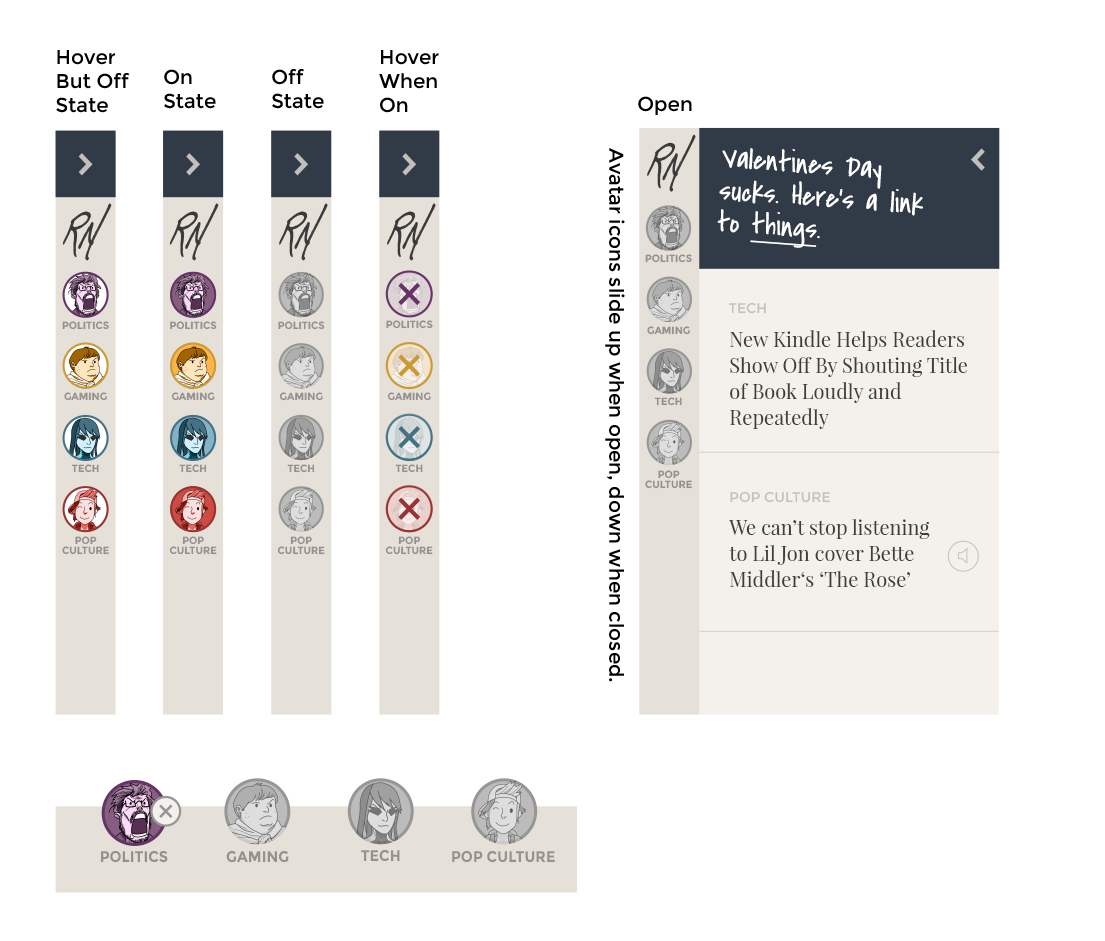
<style>
.page{position:relative;width:1105px;height:941px;background:#ffffff}
.page>*{position:absolute;margin:0}
.t1{font:20px "Montserrat-Regular";color:#000000}
.t2{font:30px/32px "CoveredByYourGrace";color:#ffffff}
.t3{font:30px/32px "CoveredByYourGrace";color:#ffffff;text-decoration:underline}
.t4{font:10.6px "Montserrat-Bold";color:#96918f;scale:0.95 1}
.t5{font:14px "Montserrat-Regular";color:#c5c1be}
.t6{font:20px/26px "PlayfairDisplay-Regular";color:#3f3d3b}
.t7{font:10.6px/10px "Montserrat-Bold";color:#96918f;scale:0.95 1}
.t8{font:15.4px "Montserrat-Bold";color:#96918f;scale:0.95 1}
</style>
<div class="page">
<p class="t1" style="left:56px;top:50px;width:74px;height:63px">Hover<br>But Off<br>State</p>
<p class="t1" style="left:379px;top:50px;width:60px;height:63px">Hover<br>When<br>On</p>
<p class="t1" style="left:164px;top:69px;width:52px;height:40px">On<br>State</p>
<p class="t1" style="left:272px;top:69px;width:52px;height:40px">Off<br>State</p>
<p class="t1" style="left:638px;top:96px;width:54px;height:19px">Open</p>
<p class="t1" style="left:605px;top:148px;width:20px;height:534px">Avatar icons slide up when open, down when closed.</p>
<p class="t2" style="left:717px;top:148px;width:206px;height:100px">Valentines Day sucks. Here’s a link to <span class="t3">things</span>.</p>
<p class="t4" style="left:645px;top:254px;width:47px;height:9px">POLITICS</p>
<p class="t5" style="left:729px;top:302px;width:37px;height:12px">TECH</p>
<p class="t4" style="left:62px;top:321px;width:47px;height:9px">POLITICS</p>
<p class="t4" style="left:170px;top:321px;width:47px;height:9px">POLITICS</p>
<p class="t4" style="left:278px;top:321px;width:47px;height:9px">POLITICS</p>
<p class="t4" style="left:386px;top:320px;width:47px;height:9px">POLITICS</p>
<p class="t4" style="left:647px;top:326px;width:43px;height:9px">GAMING</p>
<p class="t6" style="left:730px;top:330px;width:237px;height:99px">New Kindle Helps Readers Show Off By Shouting Title of Book Loudly and Repeatedly</p>
<p class="t4" style="left:64px;top:392px;width:43px;height:9px">GAMING</p>
<p class="t4" style="left:171px;top:392px;width:44px;height:9px">GAMING</p>
<p class="t4" style="left:279px;top:392px;width:44px;height:9px">GAMING</p>
<p class="t4" style="left:387px;top:392px;width:44px;height:9px">GAMING</p>
<p class="t4" style="left:654px;top:397px;width:28px;height:9px">TECH</p>
<p class="t4" style="left:71px;top:464px;width:28px;height:9px">TECH</p>
<p class="t4" style="left:179px;top:464px;width:28px;height:9px">TECH</p>
<p class="t4" style="left:287px;top:464px;width:28px;height:9px">TECH</p>
<p class="t4" style="left:395px;top:464px;width:28px;height:9px">TECH</p>
<p class="t7" style="left:645px;top:470px;width:47px;height:19px;text-align:center">POP<br>CULTURE</p>
<p class="t5" style="left:730px;top:491px;width:101px;height:12px">POP CULTURE</p>
<p class="t6" style="left:729px;top:519px;width:201px;height:68px">We can’t stop listening to Lil Jon cover Bette Middler‘s ‘The Rose’</p>
<p class="t7" style="left:62px;top:536px;width:47px;height:19px;text-align:center">POP<br>CULTURE</p>
<p class="t7" style="left:169px;top:536px;width:48px;height:19px;text-align:center">POP<br>CULTURE</p>
<p class="t7" style="left:277px;top:536px;width:48px;height:19px;text-align:center">POP<br>CULTURE</p>
<p class="t7" style="left:385px;top:536px;width:48px;height:19px;text-align:center">POP<br>CULTURE</p>
<p class="t8" style="left:101px;top:851px;width:67px;height:12px">POLITICS</p>
<p class="t8" style="left:226px;top:851px;width:63px;height:12px">GAMING</p>
<p class="t8" style="left:361px;top:850px;width:39px;height:12px">TECH</p>
<p class="t8" style="left:452px;top:851px;width:103px;height:12px">POP CULTURE</p>
</div>
